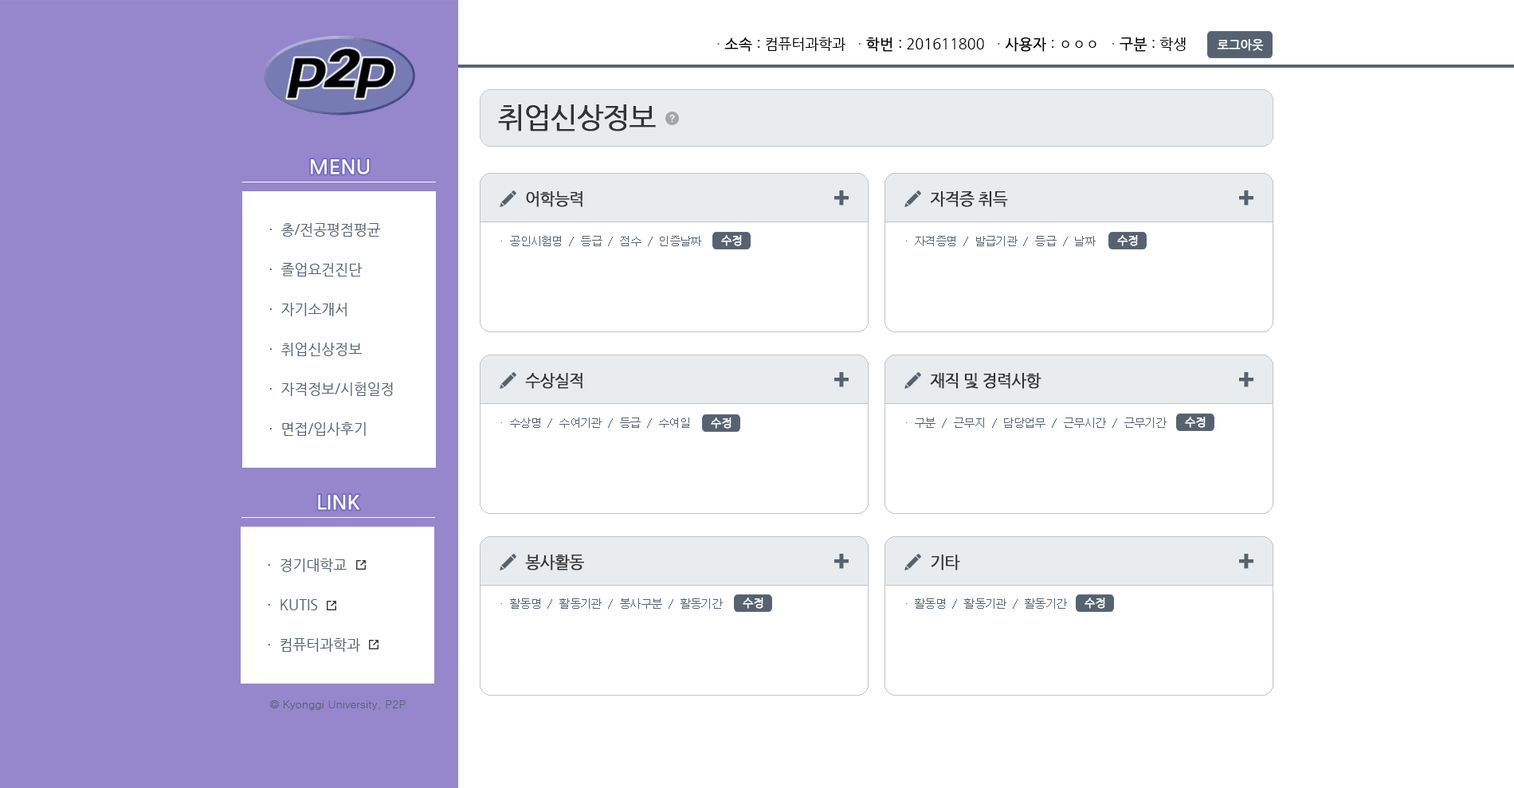
<style>
.page{position:relative;width:1514px;height:788px;background:#ffffff}
.page>*{position:absolute;margin:0}
.t1{font:14.3px "NanumGothic";color:#000000}
.t2{font:14.3px "NanumGothic";color:#566270}
.t3{font:14.3px "NanumGothic";color:#000000;font-weight:bold}
.t4{font:11.9px "NanumGothic";color:#ffffff;font-weight:bold}
.t5{font:28.7px "NanumGothic";letter-spacing:-0.05em;color:#333333;font-weight:bold}
.t6{font:19.9px "NanumGothic";color:#ffffff;font-weight:bold}
.t7{font:15.9px "NanumGothic";letter-spacing:-0.05em;color:#333333;font-weight:bold}
.t8{font:23.9px "HeadlineR-HM";letter-spacing:-0.05em;color:#566270;font-weight:bold}
.t9{font:14.3px/39.8px "NanumGothic";color:#566270}
.t10{font:11.2px "Dotum";letter-spacing:-0.05em;color:#566270}
.t11{font:11.2px "NanumGothic";color:#ffffff;font-weight:bold}
.t12{font:11.2px "Dotum";color:#566270}
</style>
<div class="page">
<p class="t1" style="left:717px;top:37px;width:468px;height:15px"><span class="t2">· </span><span class="t3">소속</span> : 컴퓨터과학과   <span class="t2">· </span><span class="t3">학번 </span>: 201611800   <span class="t2">· </span><span class="t3">사용자</span> : ㅇㅇㅇ   <span class="t2">· </span><span class="t3">구분</span> : 학생</p>
<p class="t4" style="left:1216px;top:39px;width:47px;height:12px">로그아웃</p>
<p class="t5" style="left:498px;top:104px;width:158px;height:27px">취업신상정보</p>
<p class="t6" style="left:311px;top:159px;width:59px;height:15px">MENU</p>
<p class="t7" style="left:526px;top:191px;width:56px;height:16px">어학능력</p>
<p class="t8" style="left:834px;top:190px;width:14px;height:16px">+</p>
<p class="t7" style="left:930px;top:191px;width:78px;height:16px">자격증 취득</p>
<p class="t8" style="left:1239px;top:190px;width:14px;height:16px">+</p>
<p class="t9" style="left:269px;top:223px;width:124px;height:213px">·  총/전공평점평균<br>·  졸업요건진단<br>·  자기소개서<br>·  취업신상정보<br>·  자격정보/시험일정<br>·  면접/입사후기</p>
<p class="t10" style="left:501px;top:236px;width:200px;height:10px">·  공인시험명  /  등급  /  점수  /  인증날짜</p>
<p class="t11" style="left:721px;top:235px;width:21px;height:11px">수정</p>
<p class="t10" style="left:906px;top:236px;width:189px;height:10px">·  자격증명  /  발급기관  /  등급  /  날짜</p>
<p class="t11" style="left:1117px;top:235px;width:21px;height:11px">수정</p>
<p class="t7" style="left:525px;top:373px;width:57px;height:16px">수상실적</p>
<p class="t8" style="left:834px;top:372px;width:14px;height:15px">+</p>
<p class="t7" style="left:930px;top:373px;width:111px;height:16px">재직 및 경력사항</p>
<p class="t8" style="left:1239px;top:372px;width:14px;height:15px">+</p>
<p class="t10" style="left:501px;top:417px;width:188px;height:11px">·  수상명  /  수여기관  /  등급  /  수여일</p>
<p class="t11" style="left:711px;top:417px;width:20px;height:12px">수정</p>
<p class="t10" style="left:906px;top:417px;width:260px;height:11px">·  구분  /  근무지  /  담당업무  /  근무시간  /  근무기간</p>
<p class="t11" style="left:1185px;top:417px;width:20px;height:11px">수정</p>
<p class="t6" style="left:318px;top:495px;width:41px;height:15px">LINK</p>
<p class="t7" style="left:525px;top:554px;width:59px;height:16px">봉사활동</p>
<p class="t8" style="left:834px;top:554px;width:14px;height:15px">+</p>
<p class="t7" style="left:930px;top:554px;width:30px;height:16px">기타</p>
<p class="t8" style="left:1239px;top:554px;width:14px;height:15px">+</p>
<p class="t9" style="left:268px;top:558px;width:92px;height:94px">·  경기대학교<br>·  KUTIS<br>·  컴퓨터과학과</p>
<p class="t10" style="left:501px;top:598px;width:222px;height:11px">·  활동명  /  활동기관  /  봉사구분  /  활동기간</p>
<p class="t11" style="left:742px;top:597px;width:21px;height:12px">수정</p>
<p class="t10" style="left:906px;top:598px;width:161px;height:11px">·  활동명  /  활동기관  /  활동기간</p>
<p class="t11" style="left:1084px;top:597px;width:21px;height:12px">수정</p>
<p class="t12" style="left:270px;top:700px;width:135px;height:10px">© Kyonggi University, P2P</p>
</div>
